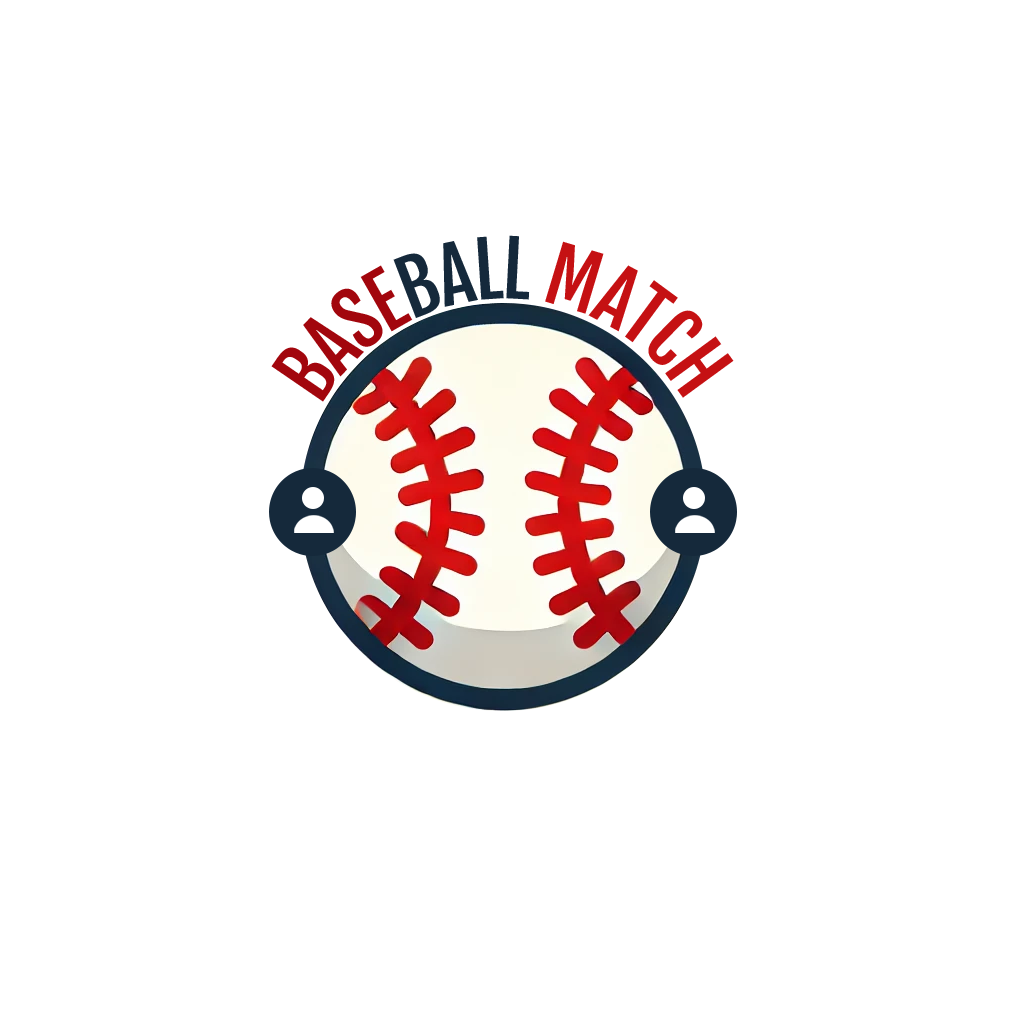
<style>
.page{position:relative;width:1024px;height:1024px;background:#ffffff}
.page>*{position:absolute;margin:0}
.t1{font:75px "FjallaOne-Regular";letter-spacing:-0.04em;color:#c51113}
.t2{font:75px "FjallaOne-Regular";letter-spacing:-0.04em;color:#15293b}
.t3{font:75px "FjallaOne-Regular";letter-spacing:-0.04em;color:#a2060d}
</style>
<div class="page">
<p class="t1" style="left:271px;top:235px;width:463px;height:167px;text-align:center"><span class="t2">           </span><span class="t3"> BASE</span><span class="t2">BALL </span>MATCH</p>
</div>
